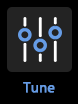
<style>
.page{position:relative;width:78px;height:104px;background:#000000}
.page>*{position:absolute;margin:0}
.t1{font:14px "SegoeUI";color:#669ce5;font-weight:bold}
</style>
<div class="page">
<p class="t1" style="left:23px;top:82px;width:32px;height:11px">Tune</p>
</div>
